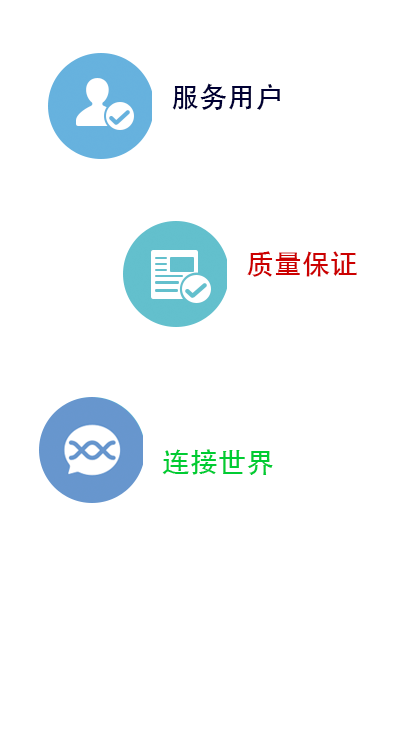
<style>
.page{position:relative;width:414px;height:736px;background:#ffffff}
.page>*{position:absolute;margin:0}
.t1{font:28px "STHeiti";color:#000033}
.t2{font:28px "STHeiti";color:#cc0000}
.t3{font:28px "STHeiti";color:#00cc33}
</style>
<div class="page">
<p class="t1" style="left:172px;top:83px;width:108px;height:27px">服务用户</p>
<p class="t2" style="left:247px;top:251px;width:110px;height:26px">质量保证</p>
<p class="t3" style="left:162px;top:449px;width:111px;height:26px">连接世界</p>
</div>
